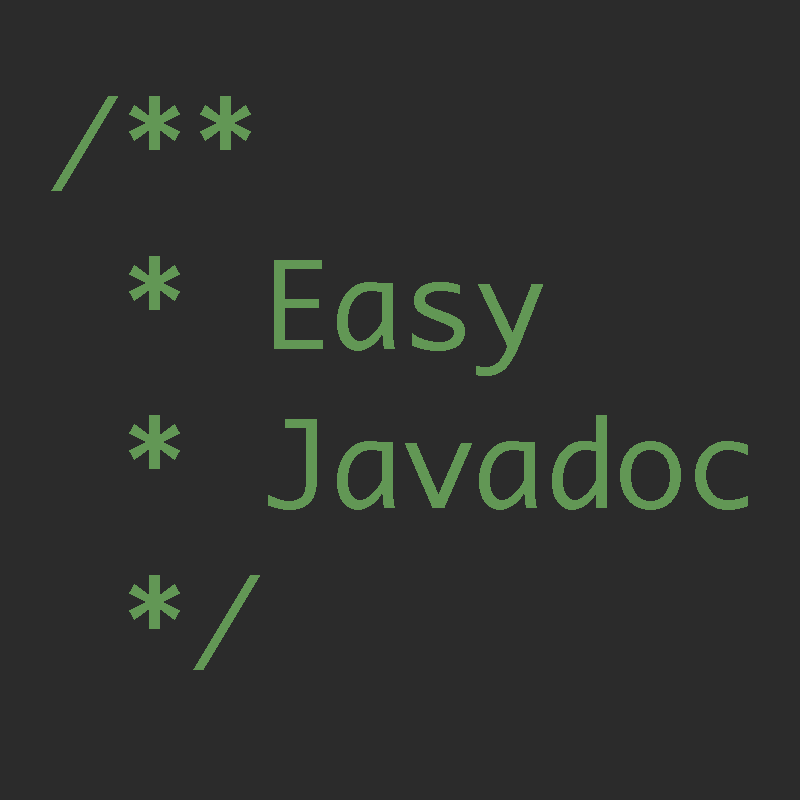
<style>
.page{position:relative;width:800px;height:800px;background:#2b2b2b}
.page>*{position:absolute;margin:0}
.t1{font:118px/53.3px "Monaco";color:#629755}
</style>
<div class="page">
<p class="t1" style="left:51px;top:96px;width:697px;height:574px">/**<br> <br><br> * Easy<br> <br><br> * Javadoc<br><br><br> */</p>
</div>
